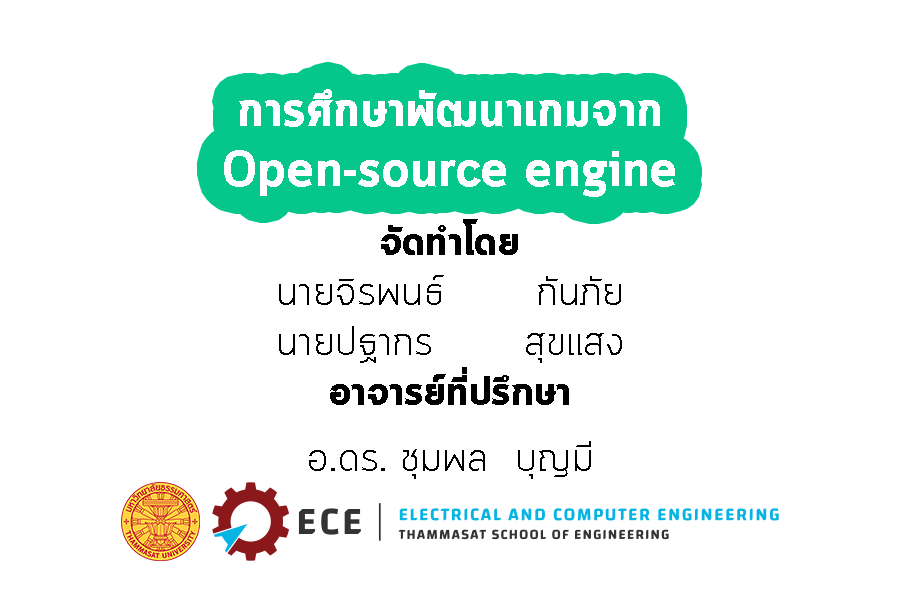
<style>
.page{position:relative;width:900px;height:600px;background:#ffffff}
.page>*{position:absolute;margin:0}
.t1{font:49.9px "Cloud-Bold";color:#ffffff}
.t2{font:41.7px "Cloud-Light";color:#000000}
.t3{font:41.7px "Cloud-Bold";color:#000000}
</style>
<div class="page">
<p class="t1" style="left:224px;top:89px;width:451px;height:108px;text-align:center">การศึกษาพัฒนาเกมจาก Open-source engine</p>
<p class="t2" style="left:279px;top:219px;width:343px;height:260px;text-align:center"><span class="t3">จัดทำโดย</span>  <br>นายจิรพนธ์       กันภัย<br>นายปฐากร       สุขแสง<br><span class="t3">อาจารย์ที่ปรึกษา </span>   <br>อ.ดร. ชุมพล  บุญมี</p>
</div>
